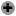
<style>
.page{position:relative;width:16px;height:16px;background:#ffffff}
.page>*{position:absolute;margin:0}
.t1{font:17.3px "Arial-BoldMT";color:#000000}
</style>
<div class="page">
<p class="t1" style="left:3px;top:3px;width:10px;height:9px">+</p>
</div>
